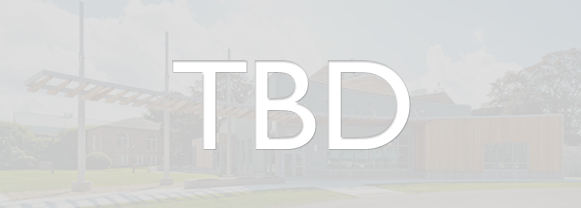
<style>
.page{position:relative;width:581px;height:208px}
.page>*{position:absolute;margin:0}
.t1{font:130px "GillSans";color:#ffffff;text-transform:uppercase}
</style>
<div class="page">
<p class="t1" style="left:172px;top:60px;width:238px;height:89px">TBD</p>
</div>
